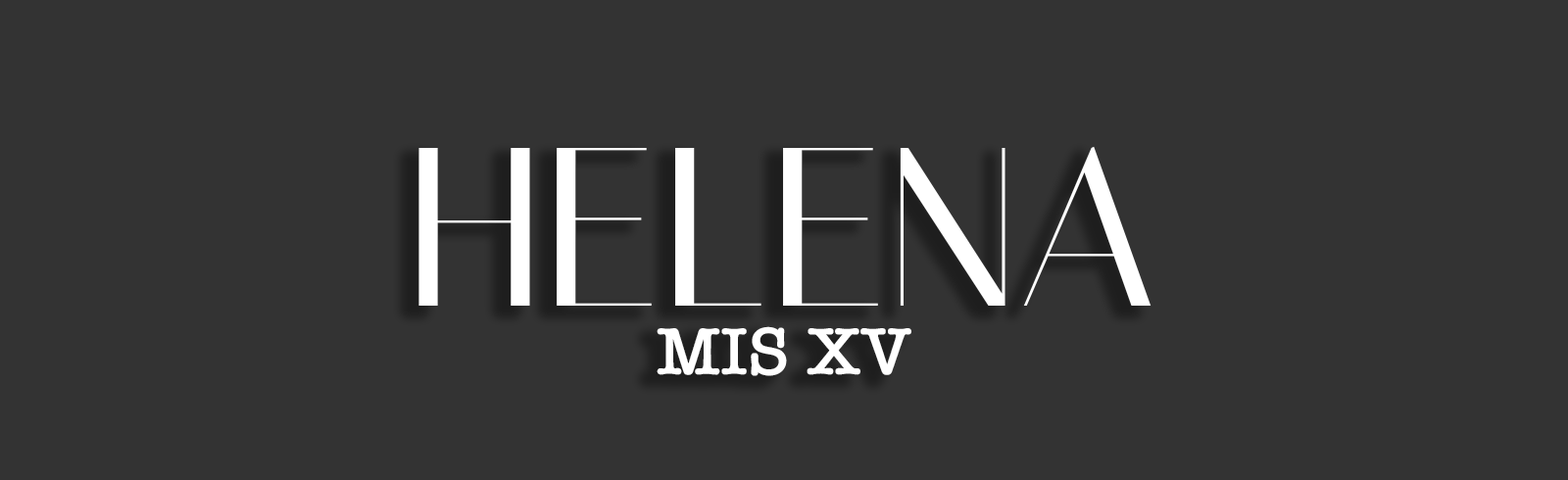
<style>
.page{position:relative;width:1568px;height:480px;background:#333333}
.page>*{position:absolute;margin:0}
.t1{font:225.4px "Italiana-Regular";color:#ffffff}
.t2{font:68.6px "AmericanTypewriter-Semibold";color:#ffffff}
</style>
<div class="page">
<p class="t1" style="left:418px;top:146px;width:734px;height:160px">HELENA</p>
<p class="t2" style="left:657px;top:326px;width:254px;height:50px">MIS XV</p>
</div>
